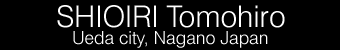
<style>
.page{position:relative;width:340px;height:50px;background:#000000}
.page>*{position:absolute;margin:0}
.t1{font:30px "Swiss721BT-Light";color:#ffffff}
.t2{font:18px "Swiss721BT-Light";color:#ffffff}
</style>
<div class="page">
<p class="t1" style="left:57px;top:5px;width:228px;height:23px">SHIOIRI Tomohiro</p>
<p class="t2" style="left:73px;top:31px;width:195px;height:17px">Ueda city, Nagano Japan</p>
</div>
